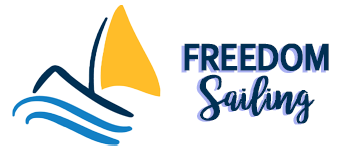
<style>
.page{position:relative;width:350px;height:150px;background:#ffffff}
.page>*{position:absolute;margin:0}
.t1{font:40px "Corbel-Bold";letter-spacing:-0.04em;color:#003054;font-weight:bold;scale:0.83 1}
.t2{font:42.9px "bromello";letter-spacing:0.01em;font-weight:bold}
.t3{font:42.9px "bromello";letter-spacing:0.01em;color:#003054;font-weight:bold}
</style>
<div class="page">
<p class="t1" style="left:184px;top:43px;width:145px;height:28px">FREEDOM</p>
<p class="t2" style="left:196px;top:75px;width:116px;height:50px">Sailing</p>
<p class="t3" style="left:199px;top:74px;width:116px;height:50px">Sailing</p>
</div>
